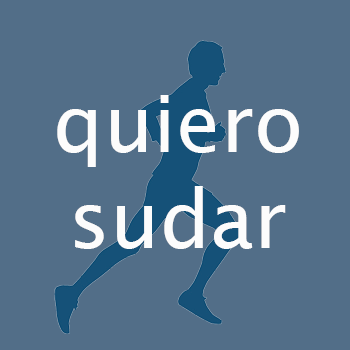
<style>
.page{position:relative;width:350px;height:350px;background:#526e88}
.page>*{position:absolute;margin:0}
.t1{font:80px "LucidaSans";color:#fcfcfc}
</style>
<div class="page">
<p class="t1" style="left:57px;top:95px;width:242px;height:154px;text-align:center">quiero<br>sudar</p>
</div>
